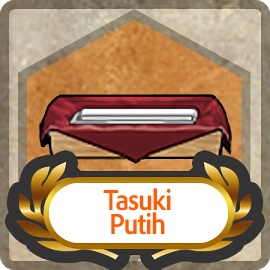
<style>
.page{position:relative;width:270px;height:270px}
.page>*{position:absolute;margin:0}
.t1{font:30px/24px "AdobeClean-Bold";letter-spacing:-0.04em;color:#ff5d00;scale:0.9 1}
</style>
<div class="page">
<p class="t1" style="left:103px;top:188px;width:68px;height:47px;text-align:center">Tasuki<br>Putih</p>
</div>
